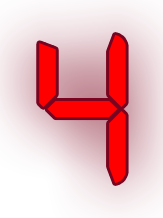
<style>
.page{position:relative;width:163px;height:218px}
.page>*{position:absolute;margin:0}
.t1{font:225.9px "Digital-7";color:#ff0000}
</style>
<div class="page">
<p class="t1" style="left:39px;top:35px;width:87px;height:148px">4</p>
</div>
